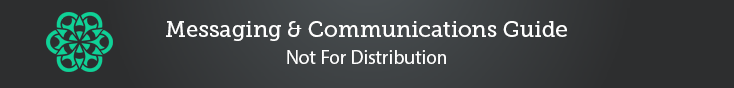
<style>
.page{position:relative;width:734px;height:88px;background:#2d2e2f}
.page>*{position:absolute;margin:0}
.t1{font:22px "MuseoSlab-500";color:#ffffff}
.t2{font:19.5px "MyriadPro-Regular";color:#ffffff}
</style>
<div class="page">
<p class="t1" style="left:166px;top:21px;width:401px;height:20px">Messaging &amp; Communications Guide</p>
<p class="t2" style="left:287px;top:50px;width:159px;height:14px">Not For Distribution</p>
</div>
